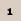
<style>
.page{position:relative;width:21px;height:21px;background:#d9cdc1}
.page>*{position:absolute;margin:0}
.t1{font:9px "Tahoma-Bold";color:#000000}
</style>
<div class="page">
<p class="t1" style="left:7px;top:8px;width:6px;height:7px">1</p>
</div>
